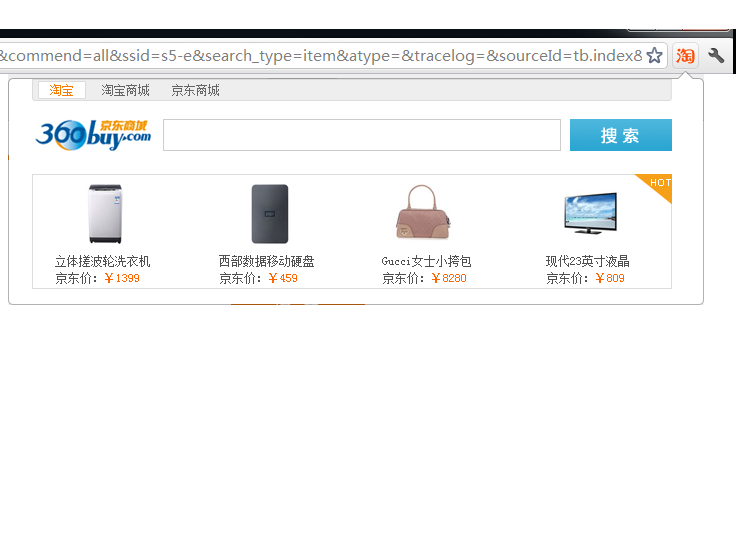
<style>
.page{position:relative;width:736px;height:550px;background:#ffffff}
.page>*{position:absolute;margin:0}
.t1{font:12px "SimSun";color:#f27b04}
.t2{font:12px "SimSun";color:#666666}
.t3{font:16px "MicrosoftYaHei";color:#ffffff;font-weight:bold}
.t4{font:10px "ArialMT";color:#ffffff}
.t5{font:12px "SimSun";color:#505050}
.t6{font:12px "SimSun";color:#ff6600}
</style>
<div class="page">
<p class="t1" style="left:50px;top:84px;width:23px;height:12px">淘宝</p>
<p class="t2" style="left:102px;top:84px;width:47px;height:12px">淘宝商城</p>
<p class="t2" style="left:172px;top:84px;width:47px;height:12px">京东商城</p>
<p class="t3" style="left:601px;top:127px;width:38px;height:17px">搜 索</p>
<p class="t4" style="left:651px;top:179px;width:20px;height:7px">HOT</p>
<p class="t5" style="left:55px;top:255px;width:95px;height:12px">立体搓波轮洗衣机</p>
<p class="t5" style="left:219px;top:255px;width:95px;height:12px">西部数据移动硬盘</p>
<p class="t5" style="left:382px;top:255px;width:89px;height:12px">Gucci女士小挎包</p>
<p class="t5" style="left:546px;top:255px;width:83px;height:12px">现代23英寸液晶</p>
<p class="t6" style="left:56px;top:272px;width:83px;height:12px"><span class="t5">京东价：</span>￥1399</p>
<p class="t5" style="left:220px;top:272px;width:77px;height:12px">京东价：<span class="t6">￥459</span></p>
<p class="t6" style="left:383px;top:272px;width:83px;height:12px"><span class="t5">京东价：</span>￥8280</p>
<p class="t5" style="left:547px;top:272px;width:77px;height:12px">京东价：<span class="t6">￥809</span></p>
</div>
